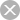
<style>
.page{position:relative;width:20px;height:20px;background:#b1b1b1}
.page>*{position:absolute;margin:0}
.t1{font:19.3px "NewsGothicMT";color:#ffffff;scale:1.45 1}
</style>
<div class="page">
<p class="t1" style="left:3px;top:5px;width:14px;height:10px">x</p>
</div>
